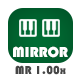
<style>
.page{position:relative;width:80px;height:80px;background:#ffffff}
.page>*{position:absolute;margin:0}
.t1{font:15px "Bauhaus93";color:#ffffff}
.t2{font:12px "Bauhaus93";color:#464646}
</style>
<div class="page">
<p class="t1" style="left:13px;top:46px;width:55px;height:12px">MIRROR</p>
<p class="t2" style="left:15px;top:65px;width:51px;height:10px">MR 1.00x</p>
</div>
